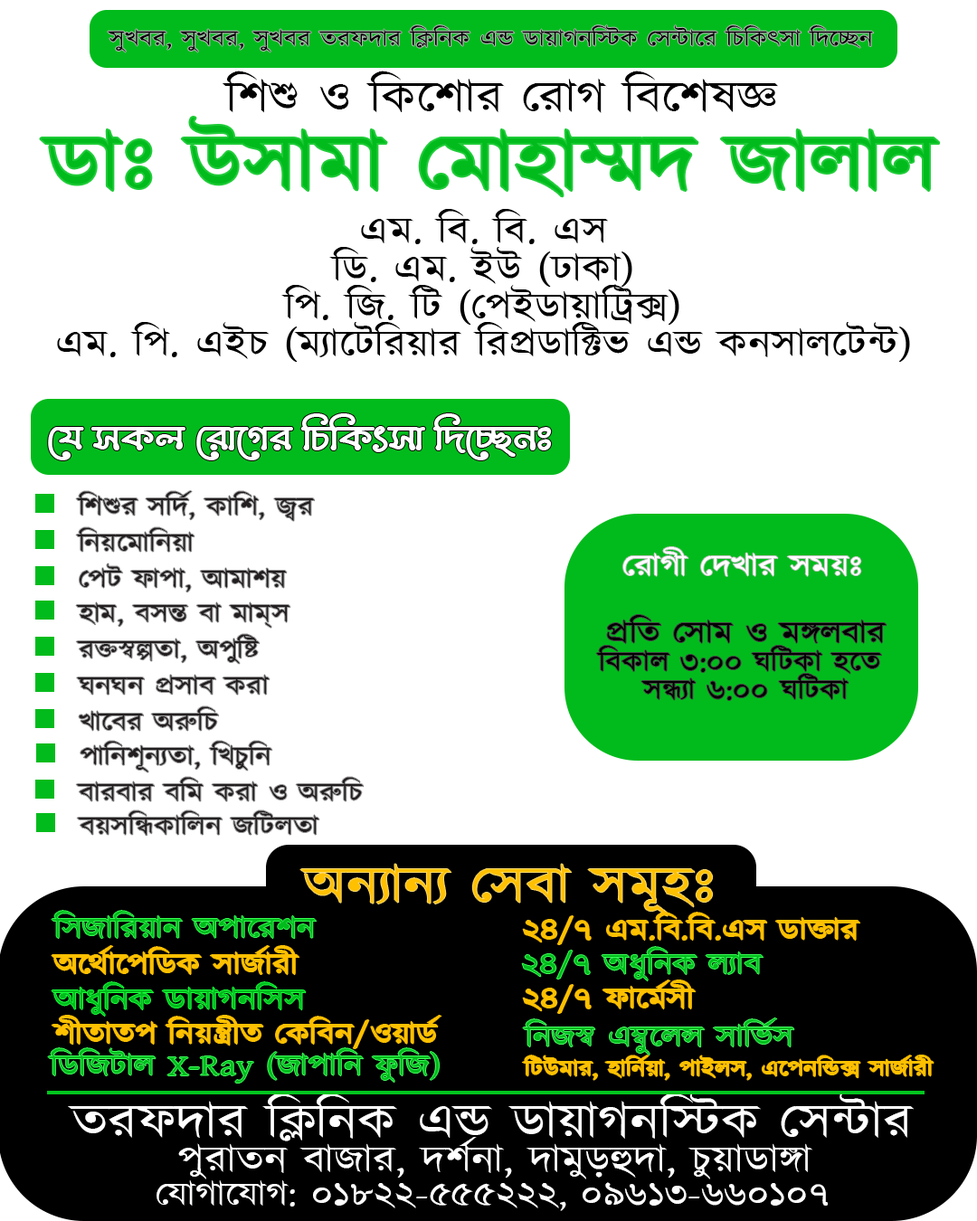
<style>
.page{position:relative;width:977px;height:1221px;background:#ffffff}
.page>*{position:absolute;margin:0}
.t1{font:22.6px "Kalpurush";color:#000000;scale:1.16 1}
.t2{font:45.2px "Kalpurush";color:#000000;scale:1.16 1}
.t3{font:79.1px "Kalpurush";color:#01bb1c;scale:1.16 1}
.t4{font:37.7px "LiShohidBarkatUnicode";color:#ffffff;scale:1.16 1}
.t5{font:26.4px "Kalpurush";color:#231f20;scale:1.16 1}
.t6{font:31.1px "Kalpurush";color:#ffffff;scale:1.16 1}
.t7{font:27.6px/27.6px "Kalpurush";color:#000000;scale:1.16 1}
.t8{font:31.1px/27.6px "Kalpurush";color:#000000;scale:1.16 1}
.t9{font:52.8px "Kalpurush";color:#ffc000;scale:1.16 1}
.t10{font:30.1px "Kalpurush";color:#01bb1c;scale:1.16 1}
.t11{font:30.1px "Kalpurush";color:#ffc000;scale:1.16 1}
.t12{font:22.6px "Kalpurush";color:#ffc000;scale:1.16 1}
.t13{font:49px "Kalpurush";color:#ffffff;scale:1.16 1}
.t14{font:37.7px "Kalpurush";color:#ffffff;scale:1.16 1}
.t15{font:33.9px "Kalpurush";color:#fffefe;scale:1.16 1}
</style>
<div class="page">
<p class="t1" style="left:108px;top:24px;width:766px;height:28px">সুখবর, সুখবর, সুখবর তরফদার ক্লিনিক এন্ড ডায়াগনস্টিক সেন্টারে চিকিৎসা দিচ্ছেন</p>
<p class="t2" style="left:222px;top:71px;width:556px;height:42px">শিশু ও কিশোর রোগ বিশেষজ্ঞ</p>
<p class="t3" style="left:41px;top:118px;width:898px;height:78px">ডাঃ উসামা মোহাম্মদ জালাল</p>
<p class="t4" style="left:48px;top:413px;width:504px;height:47px">যে সকল রোগের চিকিৎসা দিচ্ছেনঃ</p>
<p class="t5" style="left:76px;top:491px;width:239px;height:30px">শিশুর সর্দি, কাশি, জ্বর</p>
<p class="t5" style="left:76px;top:527px;width:118px;height:25px">নিয়মোনিয়া</p>
<p class="t6" style="left:623px;top:547px;width:238px;height:29px">রোগী দেখার সময়ঃ</p>
<p class="t5" style="left:79px;top:563px;width:208px;height:29px">পেট ফাপা, আমাশয়</p>
<p class="t5" style="left:76px;top:602px;width:214px;height:26px">হাম, বসন্ত বা মাম্‌স</p>
<p class="t7" style="left:596px;top:615px;width:290px;height:85px;text-align:center"><span class="t8">প্রতি সোম ও মঙ্গলবার<br></span>বিকাল ৩:০০ ঘটিকা হতে <br>সন্ধ্যা ৬:০০ ঘটিকা</p>
<p class="t5" style="left:76px;top:634px;width:184px;height:30px">রক্তস্বল্পতা, অপুষ্টি</p>
<p class="t5" style="left:77px;top:675px;width:192px;height:20px">ঘনঘন প্রসাব করা</p>
<p class="t5" style="left:79px;top:706px;width:140px;height:25px">খাবের অরুচি</p>
<p class="t5" style="left:80px;top:741px;width:192px;height:31px">পানিশূন্যতা, খিচুনি</p>
<p class="t5" style="left:76px;top:777px;width:288px;height:24px">বারবার বমি করা ও অরুচি</p>
<p class="t5" style="left:77px;top:810px;width:242px;height:26px">বয়সন্ধিকালিন জটিলতা</p>
<p class="t9" style="left:300px;top:864px;width:413px;height:52px">অন্যান্য সেবা সমূহঃ</p>
<p class="t10" style="left:52px;top:911px;width:265px;height:28px">সিজারিয়ান অপারেশন</p>
<p class="t11" style="left:523px;top:912px;width:337px;height:32px">২৪/৭ এম.বি.বি.এস ডাক্তার</p>
<p class="t11" style="left:52px;top:946px;width:247px;height:29px">অর্থোপেডিক সার্জারী</p>
<p class="t10" style="left:522px;top:947px;width:241px;height:34px">২৪/৭ অধুনিক ল্যাব</p>
<p class="t10" style="left:52px;top:982px;width:254px;height:34px">আধুনিক ডায়াগনসিস</p>
<p class="t11" style="left:523px;top:980px;width:172px;height:33px">২৪/৭ ফার্মেসী</p>
<p class="t11" style="left:52px;top:1016px;width:389px;height:32px">শীতাতপ নিয়ন্ত্রীত কেবিন/ওয়ার্ড</p>
<p class="t10" style="left:523px;top:1018px;width:271px;height:37px">নিজস্ব এম্বুলেন্স সার্ভিস</p>
<p class="t10" style="left:48px;top:1048px;width:392px;height:35px">ডিজিটাল X-Ray (জাপানি ফুজি)</p>
<p class="t12" style="left:522px;top:1055px;width:411px;height:25px">টিউমার, হার্নিয়া, পাইলস, এপেনন্ডিক্স সার্জারী</p>
<p class="t13" style="left:68px;top:1092px;width:845px;height:49px">তরফদার ক্লিনিক এন্ড ডায়াগনস্টিক সেন্টার</p>
<p class="t14" style="left:178px;top:1137px;width:634px;height:42px">পুরাতন বাজার, দর্শনা, দামুড়হুদা, চুয়াডাঙ্গা</p>
<p class="t15" style="left:156px;top:1180px;width:671px;height:31px">যোগাযোগ: ০১৮২২-৫৫৫২২২, ০৯৬১৩-৬৬০১০৭</p>
</div>
